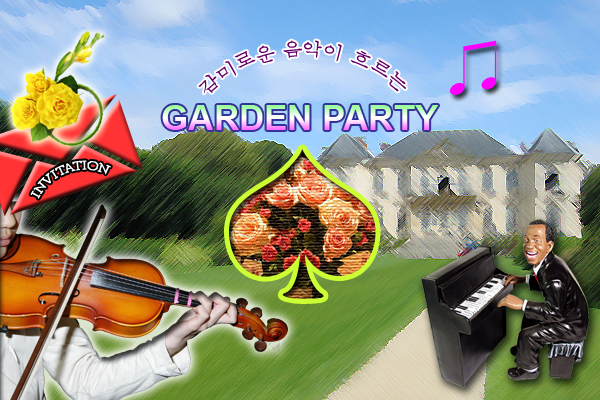
<style>
.page{position:relative;width:600px;height:400px}
.page>*{position:absolute;margin:0}
.t1{font:18px/20px "Batang";color:#660066}
.t2{font:35px "Arial-BoldMT"}
.t3{font:12px "TimesNewRomanPSMT";color:#ffffff}
</style>
<div class="page">
<p class="t1" style="left:198px;top:40px;width:208px;height:54px">감미로운 음악이 흐르는</p>
<p class="t2" style="left:162px;top:105px;width:277px;height:25px">GARDEN PARTY</p>
<p class="t3" style="left:30px;top:160px;width:81px;height:39px;rotate:-19deg">INVITATION</p>
</div>
